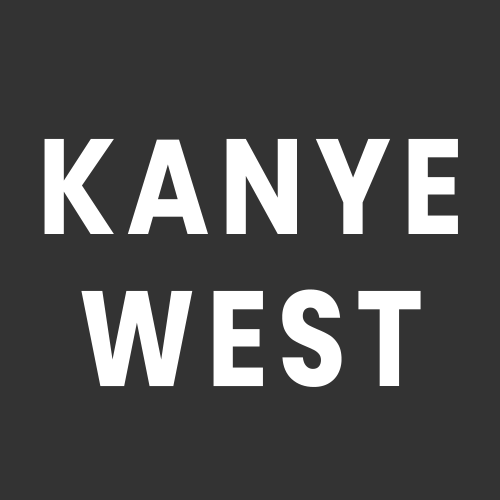
<style>
.page{position:relative;width:500px;height:500px;background:#333333}
.page>*{position:absolute;margin:0}
.t1{font:134.4px/152px "Poppins-Bold";letter-spacing:0.1em;color:#ffffff;scale:0.83 1}
</style>
<div class="page">
<p class="t1" style="left:44px;top:138px;width:414px;height:249px;text-align:center">KANYE<br>WEST</p>
</div>
